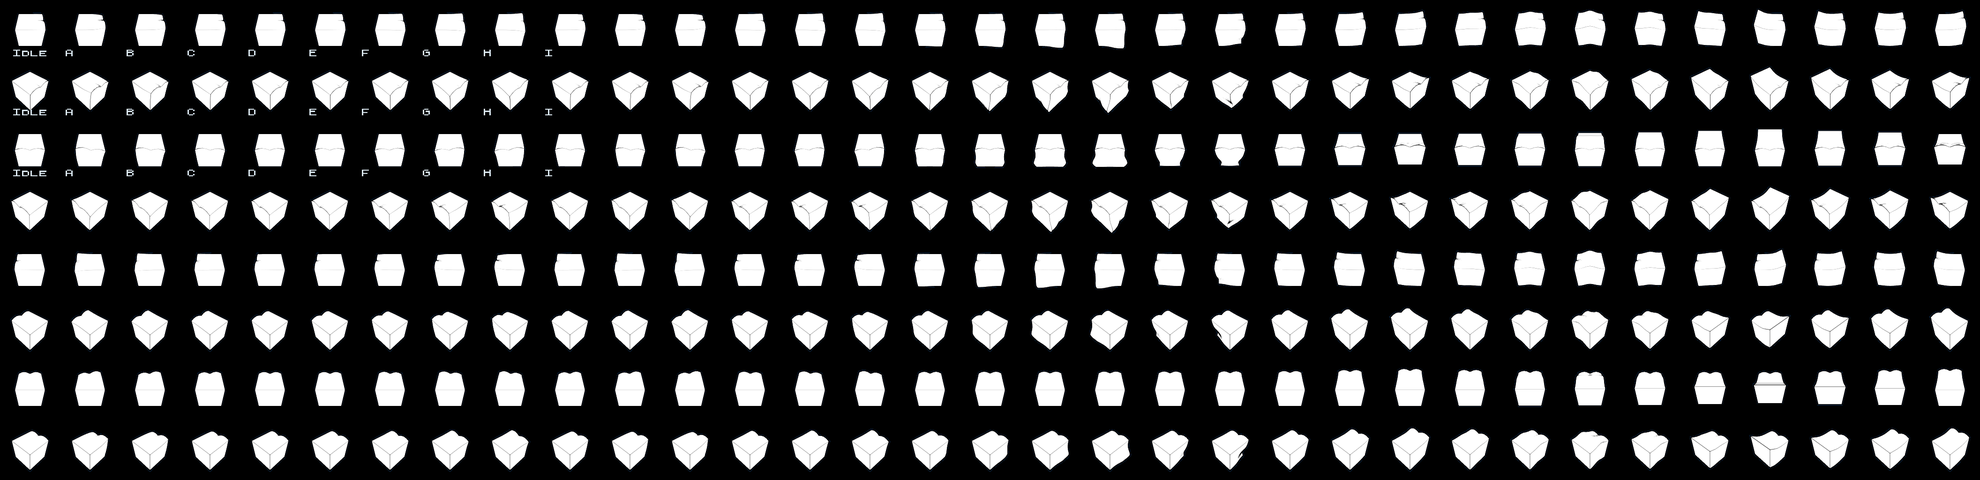
<style>
.page{position:relative;width:1980px;height:480px;background:#000000}
.page>*{position:absolute;margin:0}
.t1{font:9px "StarPerv";letter-spacing:0.025em;color:#dce9f2;scale:1.25 1}
</style>
<div class="page">
<p class="t1" style="left:13px;top:50px;width:539px;height:6px">Idle  A      B      C      D      E     F      G      H      I</p>
<p class="t1" style="left:13px;top:109px;width:539px;height:6px">Idle  A      B      C      D      E     F      G      H      I</p>
<p class="t1" style="left:13px;top:170px;width:539px;height:6px">Idle  A      B      C      D      E     F      G      H      I</p>
</div>
